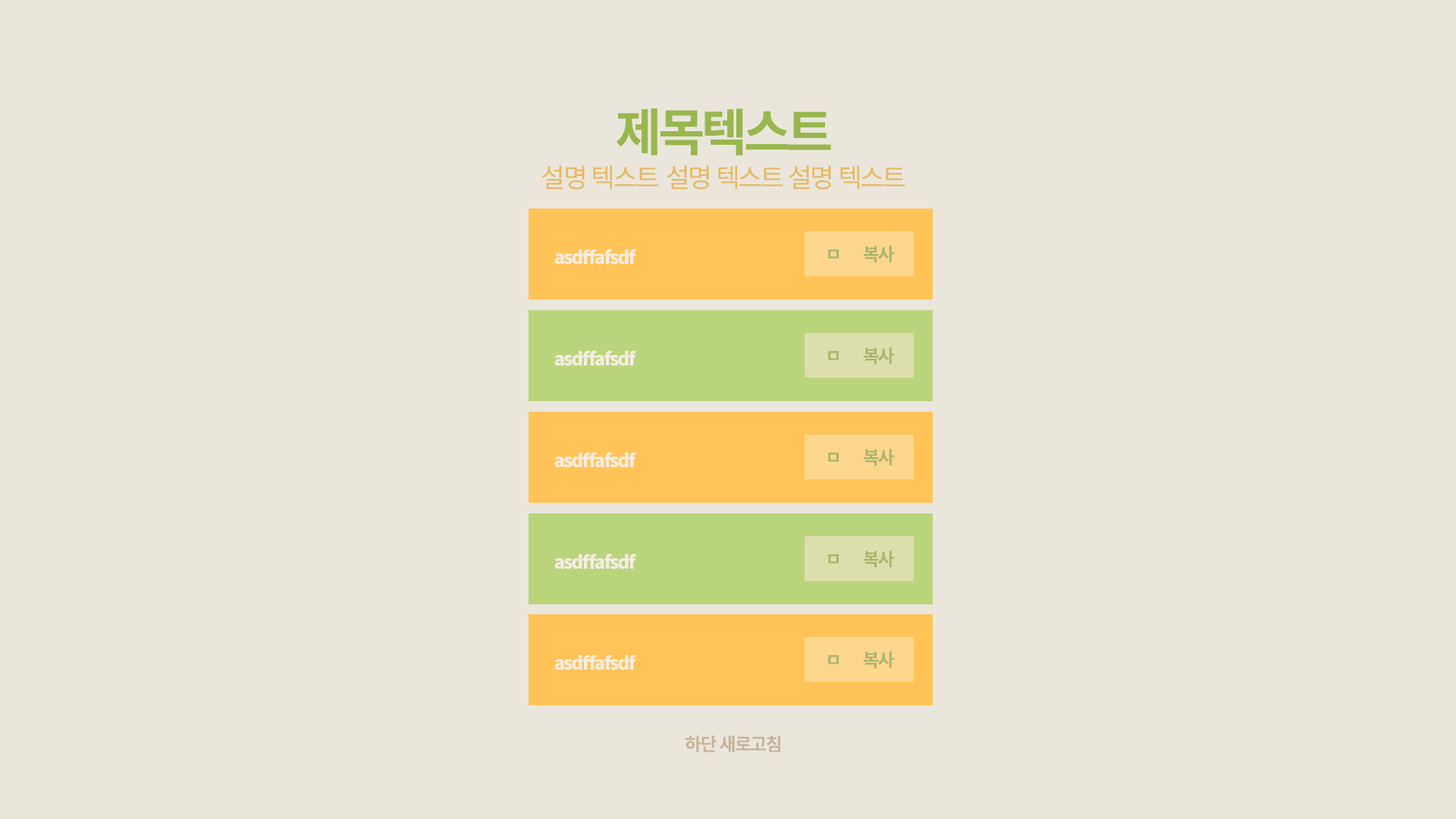
<style>
.page{position:relative;width:1456px;height:819px;background:#ebe6db}
.page>*{position:absolute;margin:0}
.t1{font:50.8px "NotoSansCJKkr-Bold";letter-spacing:-0.075em;color:#98b74e}
.t2{font:26.4px "NotoSansCJKkr-Regular";letter-spacing:-0.075em;color:#e7b75f}
.t3{font:18.2px "NotoSansCJKkr-Bold";letter-spacing:-0.075em;color:#abb46d}
.t4{font:18.2px "NotoSansCJKkr-Black";letter-spacing:-0.075em;color:#f5ede2}
.t5{font:18.2px "NotoSansCJKkr-Bold";letter-spacing:-0.075em;color:#c5b399}
</style>
<div class="page">
<p class="t1" style="left:616px;top:108px;width:215px;height:47px">제목텍스트</p>
<p class="t2" style="left:541px;top:165px;width:364px;height:25px">설명 텍스트  설명 텍스트 설명 텍스트</p>
<p class="t3" style="left:828px;top:246px;width:66px;height:17px">ㅁ        복사</p>
<p class="t4" style="left:554px;top:249px;width:82px;height:16px">asdffafsdf</p>
<p class="t4" style="left:554px;top:350px;width:82px;height:16px">asdffafsdf</p>
<p class="t3" style="left:828px;top:347px;width:66px;height:18px">ㅁ        복사</p>
<p class="t3" style="left:828px;top:449px;width:66px;height:17px">ㅁ        복사</p>
<p class="t4" style="left:554px;top:452px;width:82px;height:16px">asdffafsdf</p>
<p class="t4" style="left:554px;top:554px;width:82px;height:16px">asdffafsdf</p>
<p class="t3" style="left:828px;top:551px;width:66px;height:17px">ㅁ        복사</p>
<p class="t3" style="left:828px;top:651px;width:66px;height:18px">ㅁ        복사</p>
<p class="t4" style="left:554px;top:654px;width:82px;height:16px">asdffafsdf</p>
<p class="t5" style="left:685px;top:736px;width:95px;height:16px">하단 새로고침</p>
</div>
